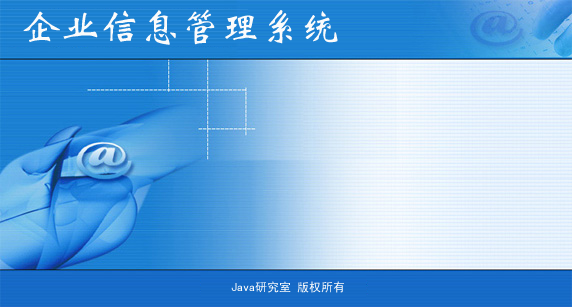
<style>
.page{position:relative;width:572px;height:307px}
.page>*{position:absolute;margin:0}
.t1{font:40px "STXinwei";color:#fbfbfb}
.t2{font:12px "SimHei";color:#fbfbfb}
</style>
<div class="page">
<p class="t1" style="left:23px;top:9px;width:315px;height:36px">企业信息管理系统</p>
<p class="t2" style="left:231px;top:281px;width:113px;height:12px">Java研究室 版权所有</p>
</div>
